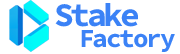
<style>
.page{position:relative;width:180px;height:54px;background:#ffffff}
.page>*{position:absolute;margin:0}
.t1{font:33px "SourceCodeRoman-Bold";letter-spacing:-0.1em;color:#3b82f6}
.t2{font:26px "SourceCodeRoman-Bold";letter-spacing:-0.08em;color:#3b82f6}
</style>
<div class="page">
<p class="t1" style="left:55px;top:3px;width:83px;height:24px">Stake</p>
<p class="t2" style="left:81px;top:30px;width:94px;height:22px">Factory</p>
</div>
